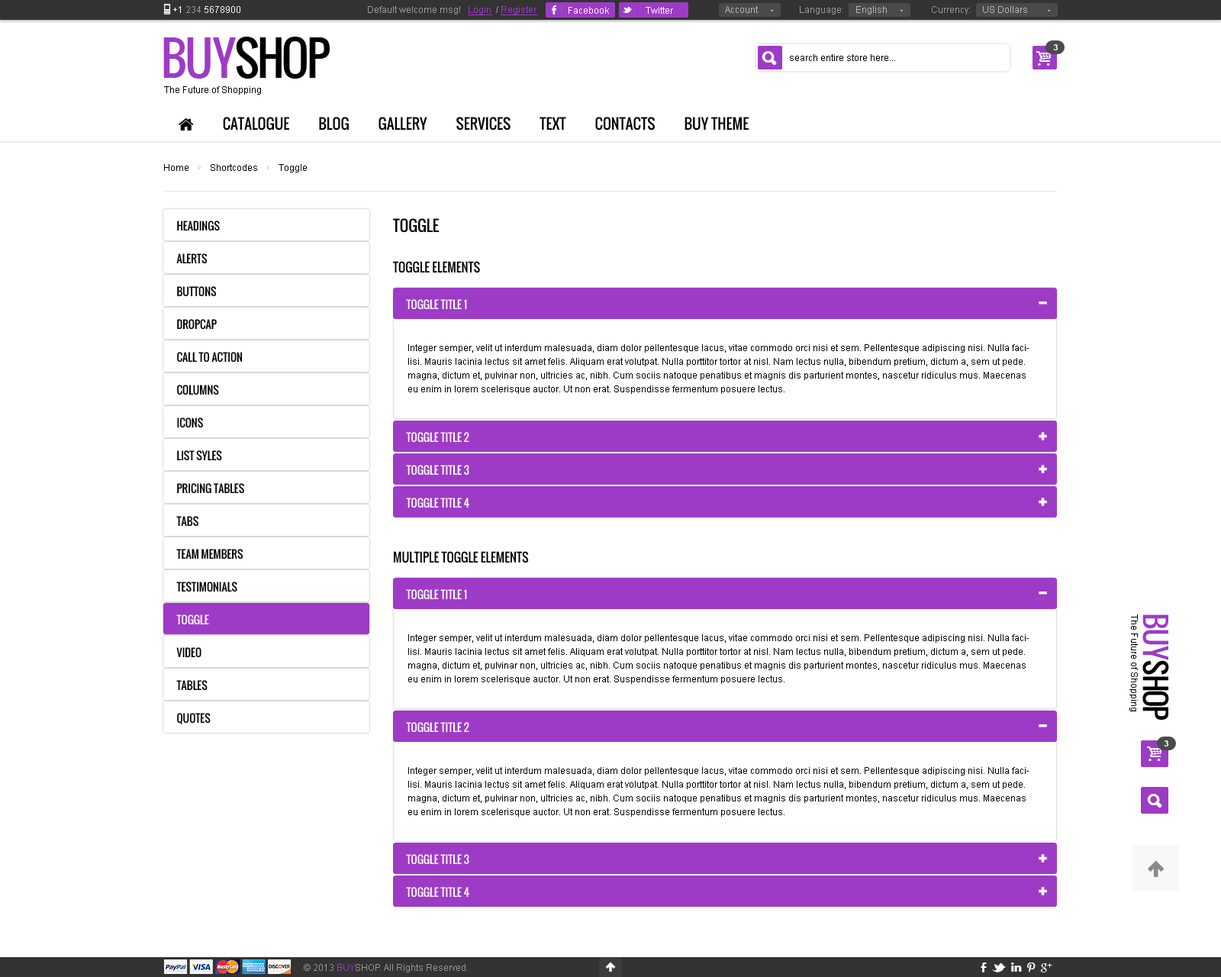
<style>
.page{position:relative;width:1221px;height:977px;background:#ffffff}
.page>*{position:absolute;margin:0}
.t1{font:9.2px "ArialMT";color:#ffffff}
.t2{font:9.2px "ArialMT";color:#9b9b9b}
.t3{font:9.2px "ArialMT";color:#9d3bc6;text-decoration:underline}
.t4{font:9.2px "ArialMT";color:#b6b6b6}
.t5{font:45.8px "Oswald";letter-spacing:-0.06em;color:#000000;text-transform:uppercase}
.t6{font:45.8px "Oswald";letter-spacing:-0.06em;color:#9d3bc6;text-transform:uppercase}
.t7{font:8.4px "Arial-BoldMT";color:#ffffff;text-transform:uppercase}
.t8{font:9.2px "ArialMT";color:#000000}
.t9{font:10.7px/32.8px "Oswald";color:#000000;text-transform:uppercase}
.t10{font:10.7px/32.8px "Oswald";color:#ffffff;text-transform:uppercase}
.t11{font:15.3px "Oswald";color:#000000;text-transform:uppercase}
.t12{font:12.2px "Oswald";color:#000000;text-transform:uppercase}
.t13{font:10.7px "Oswald";color:#ffffff;text-transform:uppercase}
.t14{font:10.7px "andepict";color:#ffffff;text-transform:uppercase}
.t15{font:9.2px/13.7px "ArialMT";color:#000000}
.t16{font:29px "Oswald";letter-spacing:-0.06em;color:#000000;text-transform:uppercase}
.t17{font:29px "Oswald";letter-spacing:-0.06em;color:#9d3bc6;text-transform:uppercase}
.t18{font:9.2px "ArialMT";color:#959595}
.t19{font:9.2px "ArialMT";color:#9d3bc6}
</style>
<div class="page">
<p class="t1" style="left:173px;top:6px;width:67px;height:7px">+1 <span class="t2">234 </span>5678900</p>
<p class="t2" style="left:368px;top:6px;width:169px;height:9px">Default welcome msg!   <span class="t3">Login </span> / <span class="t3">Register</span></p>
<p class="t2" style="left:368px;top:6px;width:169px;height:9px">Default welcome msg!   <span class="t3">Login </span> / <span class="t3">Register</span></p>
<p class="t1" style="left:568px;top:7px;width:41px;height:7px">Facebook</p>
<p class="t1" style="left:646px;top:7px;width:27px;height:7px">Twitter</p>
<p class="t4" style="left:725px;top:6px;width:33px;height:7px">Account</p>
<p class="t2" style="left:800px;top:6px;width:87px;height:8px">Language:     <span class="t4">English</span></p>
<p class="t4" style="left:932px;top:6px;width:95px;height:8px"><span class="t2">Currency:     </span>US Dollars</p>
<p class="t5" style="left:163px;top:37px;width:167px;height:42px"><span class="t6">buy</span>shop</p>
<p class="t7" style="left:1053px;top:44px;width:5px;height:6px">3</p>
<p class="t8" style="left:790px;top:54px;width:105px;height:7px">search entire store here...</p>
<p class="t8" style="left:164px;top:86px;width:97px;height:9px">The Future of Shopping</p>
<p class="t8" style="left:164px;top:164px;width:143px;height:8px">Home         Shortcodes         Toggle</p>
<p class="t9" style="left:176px;top:221px;width:68px;height:503px">Headings<br>Alerts<br>Buttons<br>Dropcap<br>Call To Action<br>Columns<br>Icons<br>List syles<br>Pricing Tables<br>Tabs<br>Team Members<br>Testimonials<br><span class="t10">Toggle<br></span>Video<br>Tables<br>Quotes</p>
<p class="t11" style="left:393px;top:218px;width:46px;height:15px">toggle</p>
<p class="t12" style="left:393px;top:261px;width:87px;height:12px">TOGGLE ELEMENTS</p>
<p class="t13" style="left:406px;top:299px;width:61px;height:10px">TOGGLE TITLE 1</p>
<p class="t14" style="left:1039px;top:301px;width:8px;height:3px">-</p>
<p class="t15" style="left:408px;top:344px;width:621px;height:50px">Integer semper, velit ut interdum malesuada, diam dolor pellentesque lacus, vitae commodo orci nisi et sem. Pellentesque adipiscing nisi. Nulla facilisi. Mauris lacinia lectus sit amet felis. Aliquam erat volutpat. Nulla porttitor tortor at nisl. Nam lectus nulla, bibendum pretium, dictum a, sem ut pede. magna, dictum et, pulvinar non, ultricies ac, nibh. Cum sociis natoque penatibus et magnis dis parturient montes, nascetur ridiculus mus. Maecenas eu enim in lorem scelerisque auctor. Ut non erat. Suspendisse fermentum posuere lectus.</p>
<p class="t13" style="left:406px;top:432px;width:63px;height:10px">TOGGLE TITLE 2</p>
<p class="t13" style="left:406px;top:465px;width:63px;height:10px">TOGGLE TITLE 3</p>
<p class="t13" style="left:406px;top:498px;width:63px;height:9px">TOGGLE TITLE 4</p>
<p class="t12" style="left:394px;top:551px;width:135px;height:12px">MULTIPLE TOGGLE ELEMENTS</p>
<p class="t13" style="left:406px;top:589px;width:61px;height:10px">TOGGLE TITLE 1</p>
<p class="t14" style="left:1039px;top:591px;width:8px;height:3px">-</p>
<p class="t8" style="left:1129px;top:614px;width:9px;height:97px;rotate:90deg">The Future of Shopping</p>
<p class="t16" style="left:1142px;top:614px;width:27px;height:106px;rotate:90deg"><span class="t17">buy</span>shop</p>
<p class="t15" style="left:408px;top:634px;width:621px;height:50px">Integer semper, velit ut interdum malesuada, diam dolor pellentesque lacus, vitae commodo orci nisi et sem. Pellentesque adipiscing nisi. Nulla facilisi. Mauris lacinia lectus sit amet felis. Aliquam erat volutpat. Nulla porttitor tortor at nisl. Nam lectus nulla, bibendum pretium, dictum a, sem ut pede. magna, dictum et, pulvinar non, ultricies ac, nibh. Cum sociis natoque penatibus et magnis dis parturient montes, nascetur ridiculus mus. Maecenas eu enim in lorem scelerisque auctor. Ut non erat. Suspendisse fermentum posuere lectus.</p>
<p class="t13" style="left:406px;top:722px;width:63px;height:10px">TOGGLE TITLE 2</p>
<p class="t14" style="left:1039px;top:724px;width:8px;height:3px">-</p>
<p class="t7" style="left:1164px;top:740px;width:5px;height:6px">3</p>
<p class="t15" style="left:408px;top:767px;width:621px;height:49px">Integer semper, velit ut interdum malesuada, diam dolor pellentesque lacus, vitae commodo orci nisi et sem. Pellentesque adipiscing nisi. Nulla facilisi. Mauris lacinia lectus sit amet felis. Aliquam erat volutpat. Nulla porttitor tortor at nisl. Nam lectus nulla, bibendum pretium, dictum a, sem ut pede. magna, dictum et, pulvinar non, ultricies ac, nibh. Cum sociis natoque penatibus et magnis dis parturient montes, nascetur ridiculus mus. Maecenas eu enim in lorem scelerisque auctor. Ut non erat. Suspendisse fermentum posuere lectus.</p>
<p class="t13" style="left:406px;top:854px;width:63px;height:10px">TOGGLE TITLE 3</p>
<p class="t13" style="left:406px;top:887px;width:63px;height:10px">TOGGLE TITLE 4</p>
<p class="t18" style="left:304px;top:964px;width:164px;height:8px">© 2013 <span class="t19">BUY</span>SHOP. All Rights Reserved.</p>
</div>
